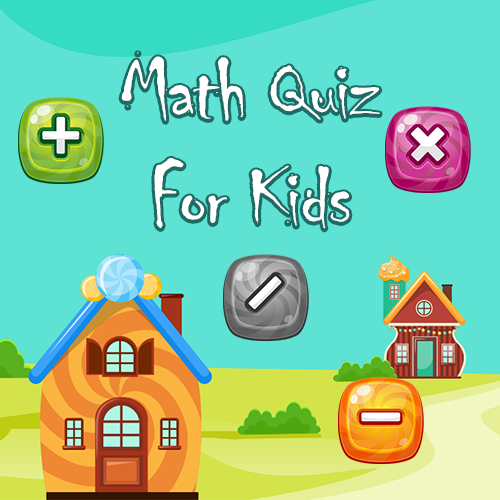
<style>
.page{position:relative;width:500px;height:500px;background:#5de2d3}
.page>*{position:absolute;margin:0}
.t1{font:88.7px "Chiller-Regular";letter-spacing:-0.02em;color:#ffffff}
</style>
<div class="page">
<p class="t1" style="left:121px;top:52px;width:259px;height:177px;text-align:center">Math Quiz<br>For Kids</p>
</div>
